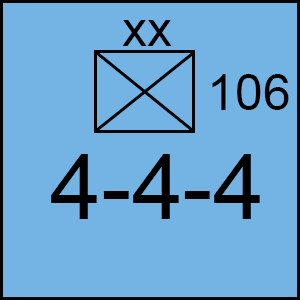
<style>
.page{position:relative;width:300px;height:300px;background:#74b4e4}
.page>*{position:absolute;margin:0}
.t1{font:50px "ArialMT";color:#000000}
.t2{font:91.7px "ArialMT";color:#000000}
</style>
<div class="page">
<p class="t1" style="left:122px;top:20px;width:50px;height:26px">xx</p>
<p class="t1" style="left:212px;top:74px;width:77px;height:36px">106</p>
<p class="t2" style="left:51px;top:154px;width:209px;height:65px">4-4-4</p>
</div>
